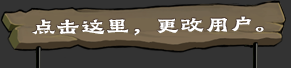
<style>
.page{position:relative;width:291px;height:68px;background:#333333}
.page>*{position:absolute;margin:0}
.t1{font:19.7px "GraveBustedStoneLishuSCRoughlyC";color:#ffffff;scale:1.4 1}
</style>
<div class="page">
<p class="t1" style="left:32px;top:16px;width:232px;height:20px;rotate:-1deg">点击这里，更改用户。</p>
</div>
